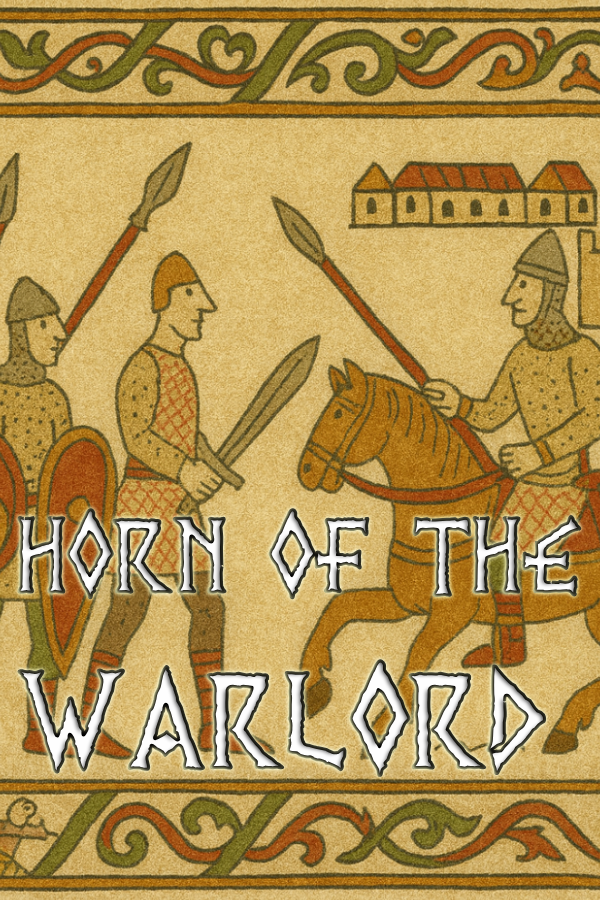
<style>
.page{position:relative;width:600px;height:900px}
.page>*{position:absolute;margin:0}
.t1{font:111.7px "PRViking"}
.t2{font:145.2px "PRViking"}
</style>
<div class="page">
<p class="t1" style="left:17px;top:508px;width:565px;height:269px">HORN OF THE <br><span class="t2">WARLORD</span></p>
</div>
